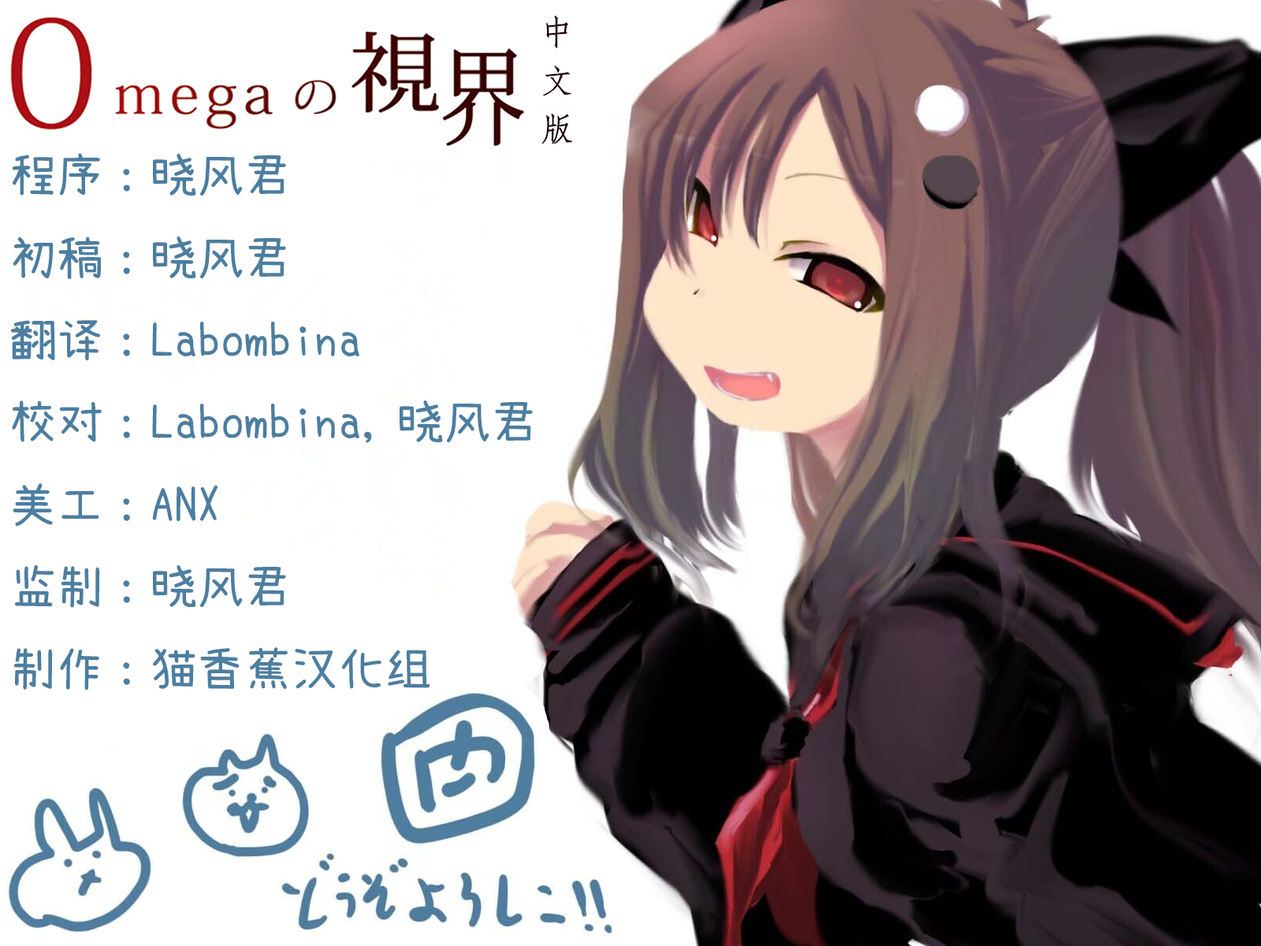
<style>
.page{position:relative;width:1261px;height:946px;background:#ffffff}
.page>*{position:absolute;margin:0}
.t1{font:33.2px/48.5px "HYd4gj";color:#1f0203}
.t2{font:47px "XiaolaiMono";color:#4c7ea0}
</style>
<div class="page">
<p class="t1" style="left:541px;top:15px;width:31px;height:129px">中<br>文<br>版</p>
<p class="t2" style="left:11px;top:153px;width:522px;height:537px">程序：晓风君<br>初稿：晓风君<br>翻译：Labombina<br>校对：Labombina,晓风君<br>美工：ANX<br>监制：晓风君<br>制作：猫香蕉汉化组</p>
</div>
